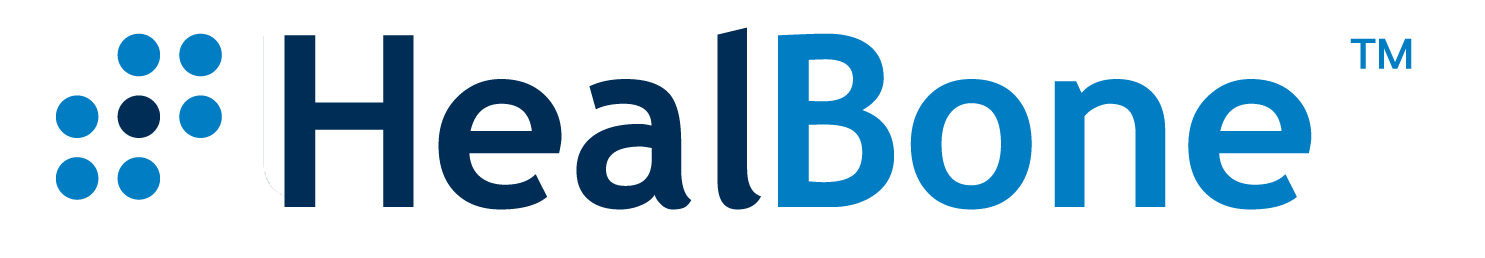
<style>
.page{position:relative;width:1485px;height:258px;background:#ffffff}
.page>*{position:absolute;margin:0}
.t1{font:240px "TrebuchetMS-Bold";color:#002d56}
.t2{font:240px "TrebuchetMS-Bold";color:#007dc3}
.t3{font:42px "PingFang-SC-Heavy";color:#007dc3}
</style>
<div class="page">
<p class="t1" style="left:284px;top:27px;width:477px;height:183px">Heal</p>
<p class="t2" style="left:778px;top:33px;width:534px;height:177px">Bone</p>
<p class="t3" style="left:1350px;top:38px;width:62px;height:31px">TM</p>
</div>
